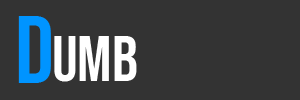
<style>
.page{position:relative;width:300px;height:100px;background:#333333}
.page>*{position:absolute;margin:0}
.t1{font:96.5px "BebasNeue-Regular";letter-spacing:-0.025em;color:#0094ff}
.t2{font:64px "BebasNeue-Regular";letter-spacing:-0.005em;color:#ffffff}
</style>
<div class="page">
<p class="t1" style="left:18px;top:16px;width:33px;height:67px">D</p>
<p class="t2" style="left:54px;top:36px;width:83px;height:46px">umb</p>
</div>
